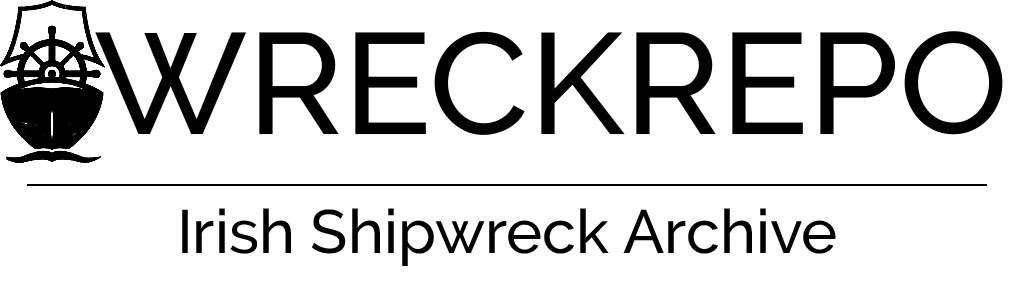
<style>
.page{position:relative;width:1014px;height:299px;background:#ffffff}
.page>*{position:absolute;margin:0}
.t1{font:143.4px "Raleway-Medium";color:#000000}
.t2{font:61.1px "Raleway-Medium";color:#000000}
</style>
<div class="page">
<p class="t1" style="left:95px;top:31px;width:908px;height:104px">WRECKREPO</p>
<p class="t2" style="left:182px;top:208px;width:654px;height:58px">Irish Shipwreck Archive</p>
</div>
